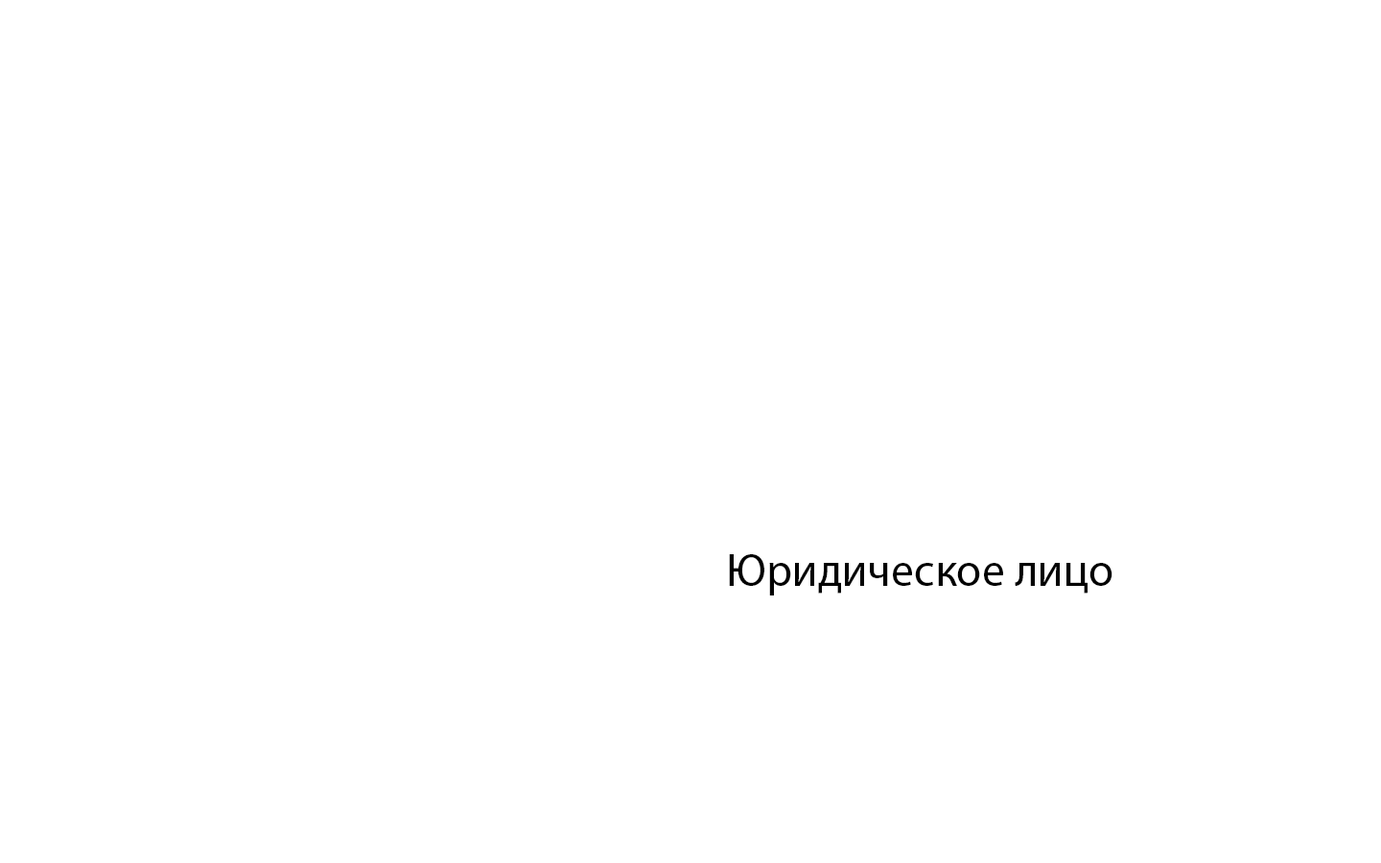
<style>
.page{position:relative;width:1381px;height:863px;background:#ffffff}
.page>*{position:absolute;margin:0}
.t1{font:46px "MyriadPro-Regular";color:#000000}
</style>
<div class="page">
<p class="t1" style="left:729px;top:554px;width:384px;height:42px">Юридическое лицо</p>
</div>
